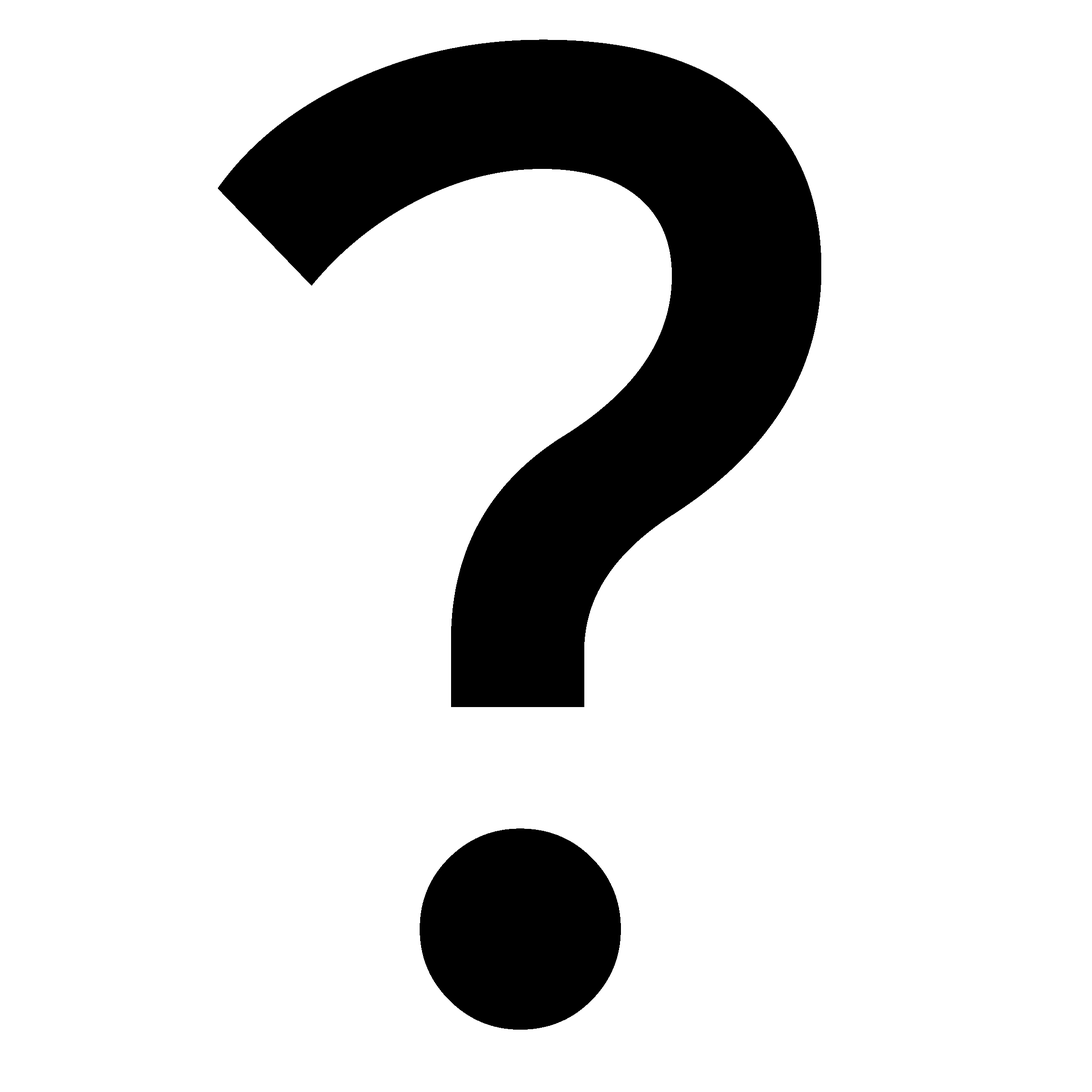
<style>
.page{position:relative;width:1092px;height:1092px;background:#ffffff}
.page>*{position:absolute;margin:0}
.t1{font:1387.8px "CascadiaCode-Regular";letter-spacing:-0.05em;color:#000000;font-weight:bold}
</style>
<div class="page">
<p class="t1" style="left:218px;top:39px;width:603px;height:991px">?</p>
</div>
